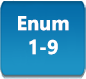
<style>
.page{position:relative;width:86px;height:79px}
.page>*{position:absolute;margin:0}
.t1{font:20px "NirmalaUI-Bold";color:#ffffff}
</style>
<div class="page">
<p class="t1" style="left:18px;top:16px;width:51px;height:39px;text-align:center">Enum<br>1-9</p>
<p class="t1" style="left:18px;top:16px;width:51px;height:39px;text-align:center">Enum<br>1-9</p>
</div>
